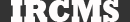
<style>
.page{position:relative;width:130px;height:22px;background:#fefcfc}
.page>*{position:absolute;margin:0}
.t1{font:32.3px "Rockwell-ExtraBold";color:#fefcfc;scale:0.89 1}
</style>
<div class="page">
<p class="t1" style="left:11px;top:0px;width:108px;height:22px">IRCMS</p>
</div>
